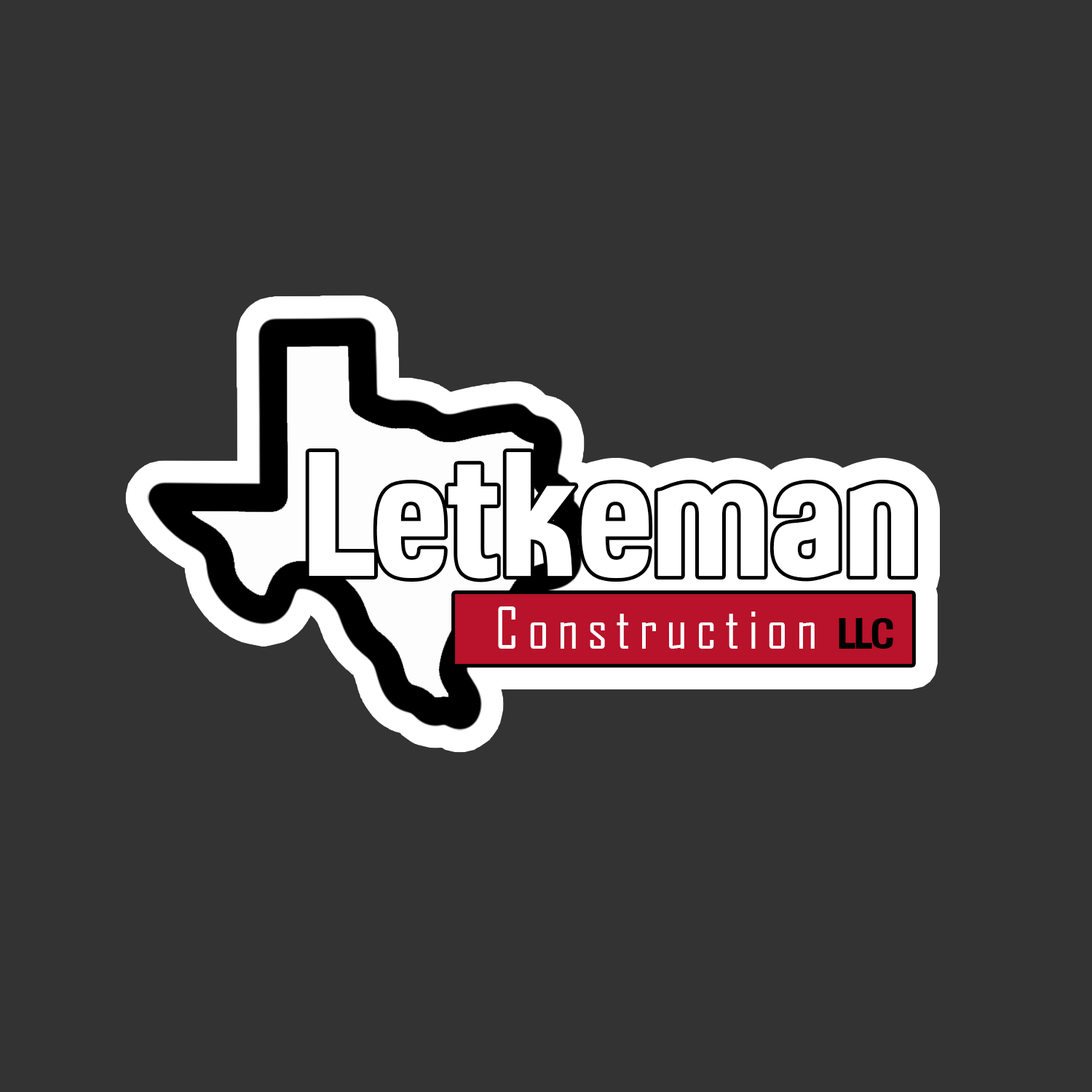
<style>
.page{position:relative;width:1092px;height:1092px;background:#333333}
.page>*{position:absolute;margin:0}
.t1{font:155.4px "KasseUltraFLF";letter-spacing:0.02em;color:#ffffff;scale:0.68 1}
.t2{font:55.4px "AgencyFB-Reg";letter-spacing:0.16em;color:#fefefe}
.t3{font:37.7px "KasseUltraFLF";letter-spacing:-0.02em;color:#000000;scale:0.69 1}
</style>
<div class="page">
<p class="t1" style="left:309px;top:452px;width:605px;height:127px">Letkeman</p>
<p class="t2" style="left:498px;top:606px;width:317px;height:43px">Construction</p>
<p class="t3" style="left:839px;top:618px;width:54px;height:31px">LLC</p>
</div>
